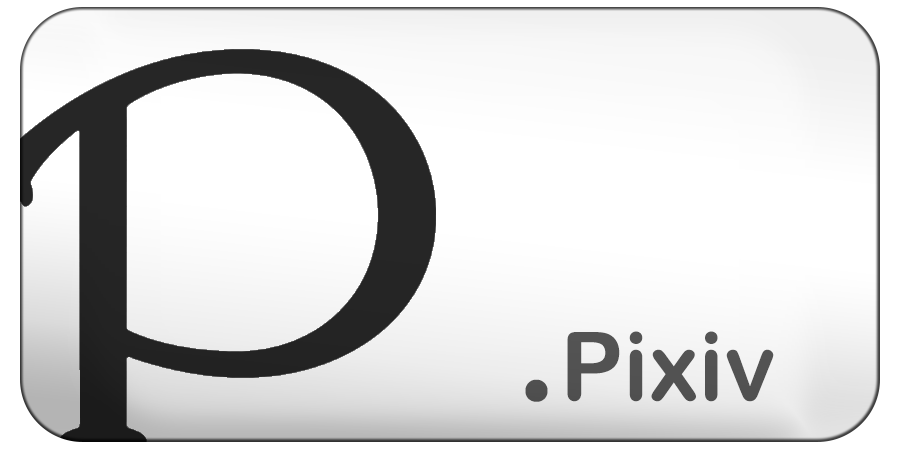
<style>
.page{position:relative;width:900px;height:450px;background:#ffffff}
.page>*{position:absolute;margin:0}
.t1{font:95px "ArialRoundedMTBold";color:#525252}
.t2{font:150px "ArialRoundedMTBold";color:#525252}
</style>
<div class="page">
<p class="t1" style="left:525px;top:331px;width:249px;height:71px"><span class="t2">.</span>Pixiv</p>
</div>
